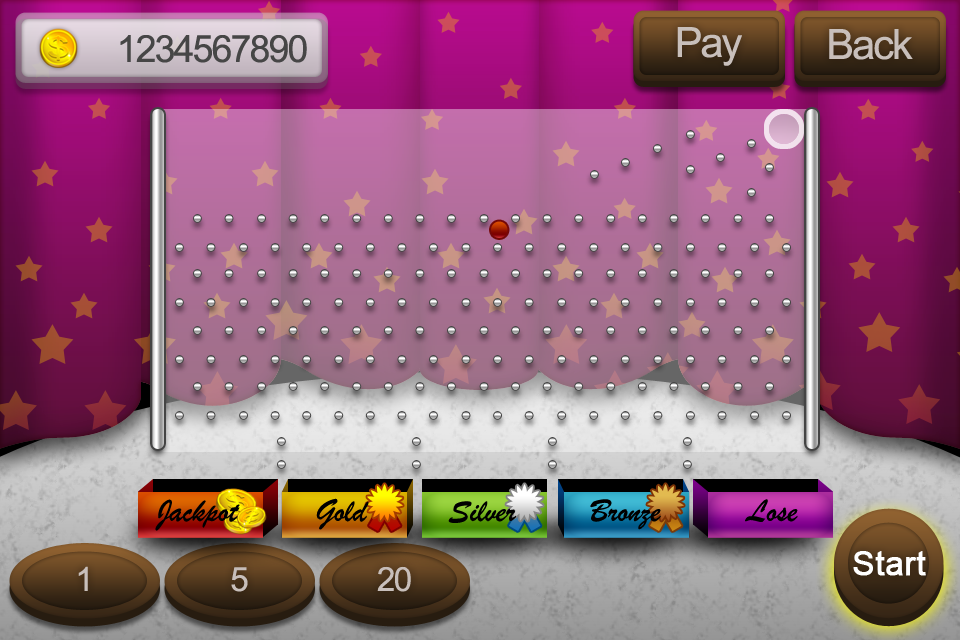
<style>
.page{position:relative;width:960px;height:640px}
.page>*{position:absolute;margin:0}
.t1{font:41.7px "ArialMT";letter-spacing:-0.05em;color:#c8bfbb}
.t2{font:37.5px "ArialMT";letter-spacing:-0.05em;color:#464646}
.t3{font:33.3px "BrushScriptMT";color:#000000}
.t4{font:33.3px "ArialMT";color:#ffffff;font-weight:bold}
.t5{font:33.3px "ArialMT";letter-spacing:-0.05em;color:#c8bfbb}
</style>
<div class="page">
<p class="t1" style="left:677px;top:27px;width:65px;height:39px">Pay</p>
<p class="t1" style="left:829px;top:29px;width:84px;height:31px">Back</p>
<p class="t2" style="left:120px;top:35px;width:187px;height:28px">1234567890</p>
<p class="t3" style="left:155px;top:499px;width:85px;height:32px">Jackpot</p>
<p class="t3" style="left:316px;top:498px;width:53px;height:32px">Gold</p>
<p class="t3" style="left:448px;top:501px;width:68px;height:22px">Silver</p>
<p class="t3" style="left:590px;top:499px;width:71px;height:31px">Bronze</p>
<p class="t3" style="left:745px;top:499px;width:53px;height:23px">Lose</p>
<p class="t4" style="left:853px;top:551px;width:73px;height:25px">Start</p>
<p class="t5" style="left:78px;top:566px;width:10px;height:25px">1</p>
<p class="t5" style="left:231px;top:567px;width:17px;height:25px">5</p>
<p class="t5" style="left:377px;top:566px;width:34px;height:26px">20</p>
</div>
